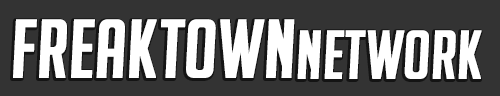
<style>
.page{position:relative;width:500px;height:96px;background:#333333}
.page>*{position:absolute;margin:0}
.t1{font:80.5px "BigNoodleTitling-Oblique";color:#ffffff;text-transform:uppercase;font-weight:bold}
.t2{font:66.6px "BigNoodleTitling-Oblique";color:#ffffff;text-transform:uppercase;font-weight:bold}
</style>
<div class="page">
<p class="t1" style="left:13px;top:19px;width:282px;height:59px">freaktown</p>
<p class="t2" style="left:297px;top:30px;width:185px;height:49px">network</p>
</div>
